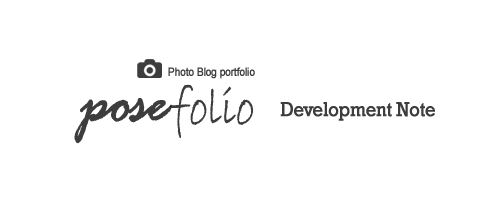
<style>
.page{position:relative;width:500px;height:200px;background:#ffffff}
.page>*{position:absolute;margin:0}
.t1{font:11.6px "ArialMT";letter-spacing:-0.04em;color:#3d3d3d;font-weight:bold;scale:0.89 1}
.t2{font:53.6px "BradleyHandITC";letter-spacing:-0.04em;color:#3d3d3d;font-weight:bold;scale:0.89 1}
.t3{font:71.5px "RageItalic";letter-spacing:-0.04em;color:#3d3d3d;font-weight:bold;scale:0.89 1}
.t4{font:20.8px "Rockwell";letter-spacing:-0.04em;color:#3d3d3d;font-weight:bold;scale:0.89 1}
</style>
<div class="page">
<p class="t1" style="left:168px;top:67px;width:87px;height:12px">Photo Blog portfolio</p>
<p class="t2" style="left:170px;top:84px;width:84px;height:54px">folio</p>
<p class="t3" style="left:74px;top:98px;width:98px;height:46px">pose</p>
<p class="t4" style="left:280px;top:102px;width:155px;height:19px">Development Note</p>
</div>
